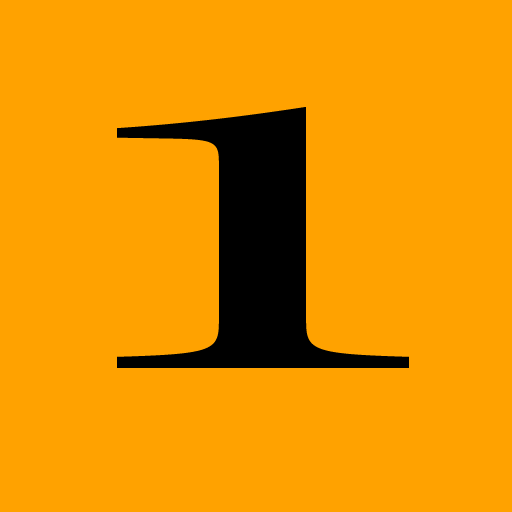
<style>
.page{position:relative;width:512px;height:512px;background:#ffa200}
.page>*{position:absolute;margin:0}
.t1{font:411.1px "MinionPro-Regular";color:#000000;scale:2.58 1}
</style>
<div class="page">
<p class="t1" style="left:117px;top:107px;width:292px;height:261px">1</p>
</div>
